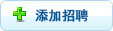
<style>
.page{position:relative;width:113px;height:31px}
.page>*{position:absolute;margin:0}
.t1{font:13px "SimHei";color:#005998;font-weight:bold}
</style>
<div class="page">
<p class="t1" style="left:35px;top:9px;width:54px;height:13px">添加招聘</p>
</div>
